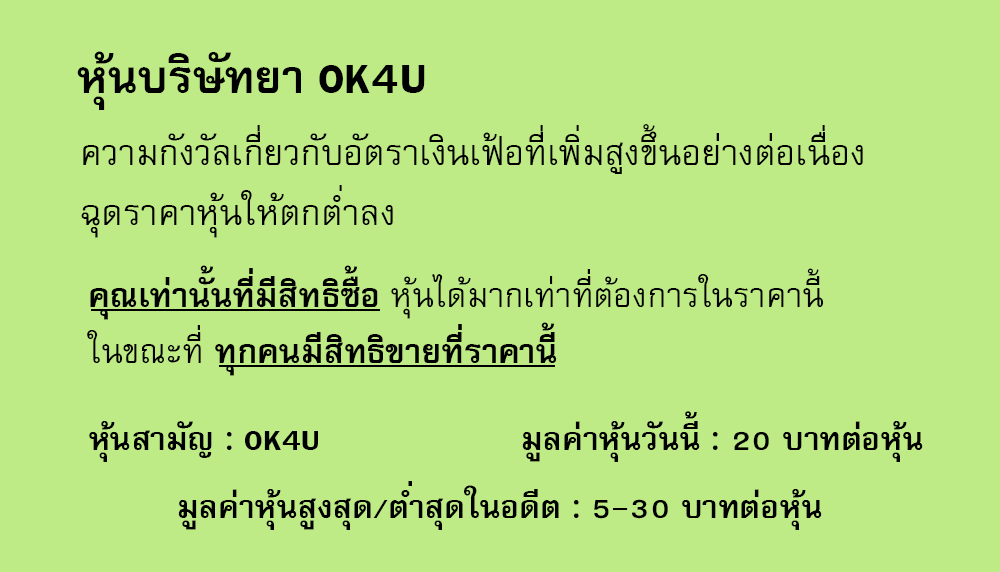
<style>
.page{position:relative;width:1000px;height:572px;background:#beeb85}
.page>*{position:absolute;margin:0}
.t1{font:64px "FreesiaUPCBold";color:#000000}
.t2{font:50px/60px "FreesiaUPC";color:#000000}
.t3{font:47px "FreesiaUPC";color:#000000}
.t4{font:47px "FreesiaUPCBold";color:#000000}
.t5{font:45px "FreesiaUPCBold";color:#000000}
</style>
<div class="page">
<p class="t1" style="left:77px;top:51px;width:348px;height:59px">หุ้นบริษัทยา OK4U</p>
<p class="t2" style="left:81px;top:124px;width:782px;height:114px">ความกังวัลเกี่ยวกับอัตราเงินเฟ้อที่เพิ่มสูงขึ้นอย่างต่อเนื่อง<br>ฉุดราคาหุ้นให้ตกต่ำลง</p>
<p class="t3" style="left:87px;top:265px;width:737px;height:111px"><span class="t4">คุณเท่านั้นที่มีสิทธิซื้อ </span>หุ้นได้มากเท่าที่ต้องการในราคานี้<br>ในขณะที่<span class="t4"> ทุกคนมีสิทธิขายที่ราคานี้</span></p>
<p class="t5" style="left:522px;top:411px;width:401px;height:51px">มูลค่าหุ้นวันนี้ : 20 บาทต่อหุ้น</p>
<p class="t5" style="left:89px;top:421px;width:229px;height:41px">หุ้นสามัญ : OK4U</p>
<p class="t5" style="left:178px;top:481px;width:644px;height:49px">มูลค่าหุ้นสูงสุด/ต่ำสุดในอดีต : 5-30 บาทต่อหุ้น</p>
</div>
